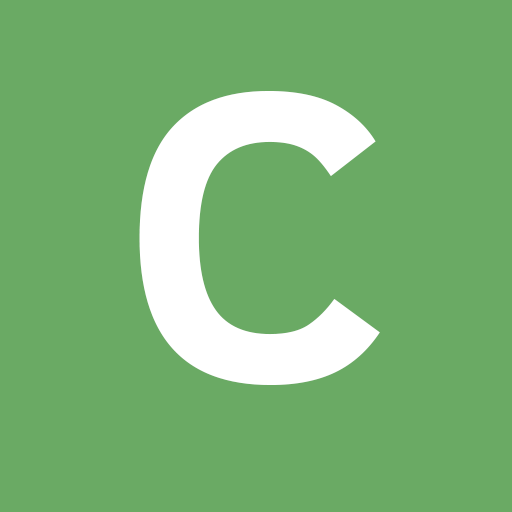
<style>
.page{position:relative;width:512px;height:512px;background:#6aaa64}
.page>*{position:absolute;margin:0}
.t1{font:416.7px "ClearSans-Bold";color:#ffffff}
</style>
<div class="page">
<p class="t1" style="left:139px;top:91px;width:241px;height:294px">С</p>
</div>
